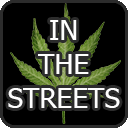
<style>
.page{position:relative;width:128px;height:128px;background:#000000}
.page>*{position:absolute;margin:0}
.t1{font:28px "Tahoma";color:#fefefe}
</style>
<div class="page">
<p class="t1" style="left:8px;top:20px;width:112px;height:88px;text-align:center">IN<br>THE<br>STREETS</p>
</div>
